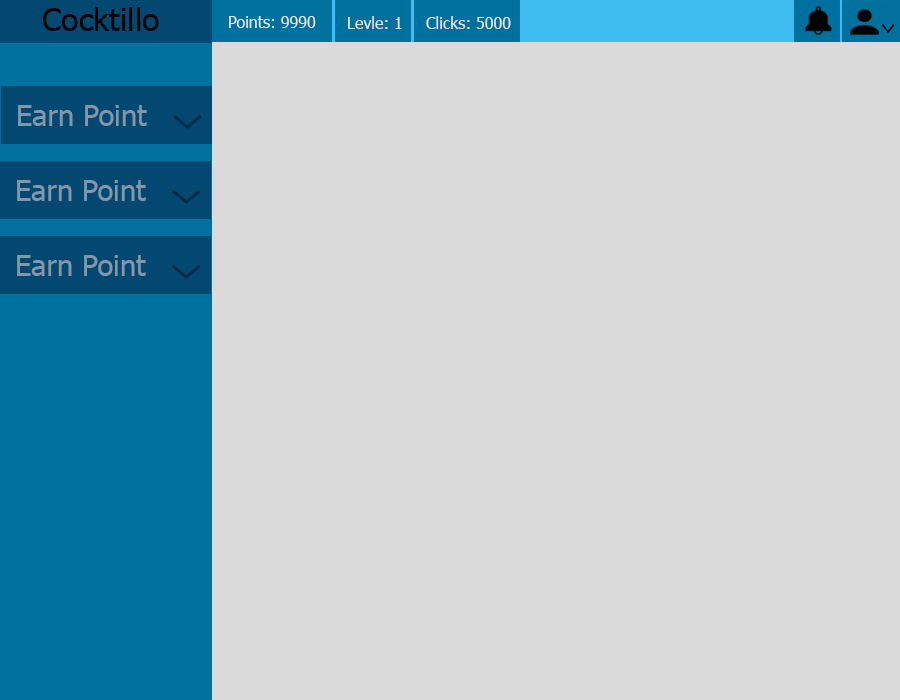
<style>
.page{position:relative;width:900px;height:700px;background:#dadada}
.page>*{position:absolute;margin:0}
.t1{font:32px "Tahoma";color:#000000}
.t2{font:16px "Tahoma";color:#e6e6e6}
.t3{font:29px "Tahoma";color:#8297a9}
</style>
<div class="page">
<p class="t1" style="left:43px;top:7px;width:116px;height:24px">Cocktillo</p>
<p class="t2" style="left:229px;top:16px;width:87px;height:12px">Points: 9990</p>
<p class="t2" style="left:348px;top:16px;width:54px;height:13px">Levle: 1</p>
<p class="t2" style="left:426px;top:16px;width:85px;height:13px">Clicks: 5000</p>
<p class="t3" style="left:18px;top:105px;width:129px;height:21px">Earn Point</p>
<p class="t3" style="left:17px;top:180px;width:129px;height:21px">Earn Point</p>
<p class="t3" style="left:17px;top:255px;width:129px;height:21px">Earn Point</p>
</div>
